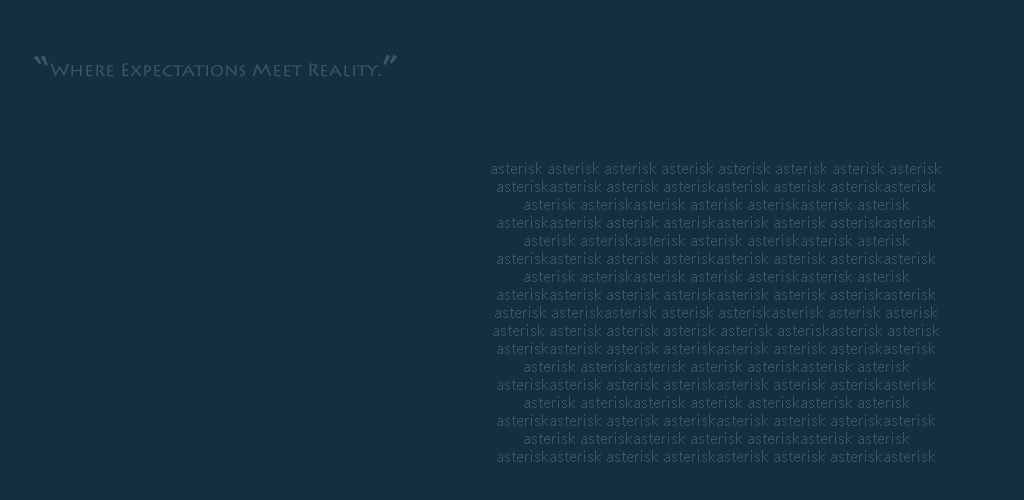
<style>
.page{position:relative;width:1024px;height:500px;background:#152f3e}
.page>*{position:absolute;margin:0}
.t1{font:49.8px "LithosPro-Regular";color:#3a5768}
.t2{font:50px "LithosPro-Regular";color:#3a5768}
.t3{font:18px "LithosPro-Regular";color:#3a5768}
.t4{font:16px/18px "LaoUI";color:#3a5768}
</style>
<div class="page">
<p class="t1" style="left:383px;top:54px;width:15px;height:11px;rotate:180deg">“</p>
<p class="t2" style="left:33px;top:55px;width:15px;height:11px">“</p>
<p class="t3" style="left:50px;top:63px;width:331px;height:14px">Where Expectations Meet Reality.</p>
<p class="t4" style="left:491px;top:162px;width:450px;height:300px;text-align:center">asterisk asterisk asterisk asterisk asterisk asterisk asterisk asterisk asteriskasterisk asterisk asteriskasterisk asterisk asteriskasterisk asterisk asteriskasterisk asterisk asteriskasterisk asterisk asteriskasterisk asterisk asteriskasterisk asterisk asteriskasterisk asterisk asteriskasterisk asterisk asteriskasterisk asterisk asteriskasterisk asterisk asteriskasterisk asterisk asteriskasterisk asterisk asteriskasterisk asterisk asteriskasterisk asterisk asteriskasterisk asterisk asteriskasterisk asterisk asteriskasterisk asterisk asteriskasterisk asterisk asteriskasterisk asterisk asterisk asterisk asterisk asterisk asterisk asterisk asteriskasterisk asterisk asteriskasterisk asterisk asteriskasterisk asterisk asteriskasterisk asterisk asteriskasterisk asterisk asteriskasterisk asterisk asteriskasterisk asterisk asteriskasterisk asterisk asteriskasterisk asterisk asteriskasterisk asterisk asteriskasterisk asterisk asteriskasterisk asterisk asteriskasterisk asterisk asteriskasterisk asterisk asteriskasterisk asterisk asteriskasterisk asterisk asteriskasterisk asterisk asteriskasterisk asterisk asteriskasterisk asterisk asterisk</p>
</div>
